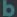
<style>
.page{position:relative;width:17px;height:17px;background:#333333}
.page>*{position:absolute;margin:0}
.t1{font:22.3px "Gilroy-ExtraBold";color:#37797b;scale:0.93 1}
</style>
<div class="page">
<p class="t1" style="left:3px;top:0px;width:12px;height:17px">b</p>
</div>
